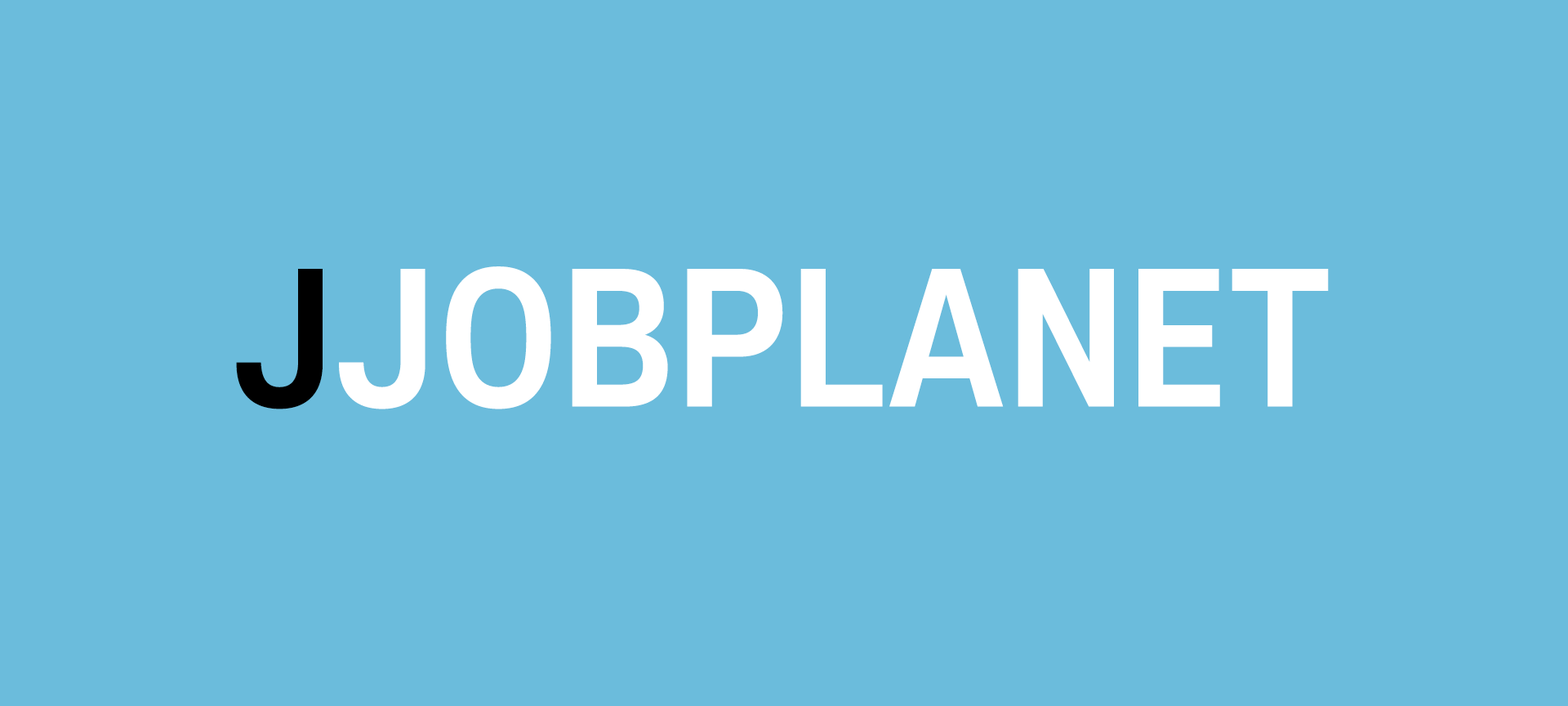
<style>
.page{position:relative;width:1568px;height:706px;background:#6bbcdc}
.page>*{position:absolute;margin:0}
.t1{font:173.6px "S-CoreDream-6Bold";letter-spacing:0.02em;color:#ffffff;scale:0.96 1}
.t2{font:173.6px "S-CoreDream-6Bold";letter-spacing:0.02em;color:#000000;scale:0.96 1}
</style>
<div class="page">
<p class="t1" style="left:236px;top:266px;width:1093px;height:143px"><span class="t2">J</span>JOBPLANET</p>
</div>
